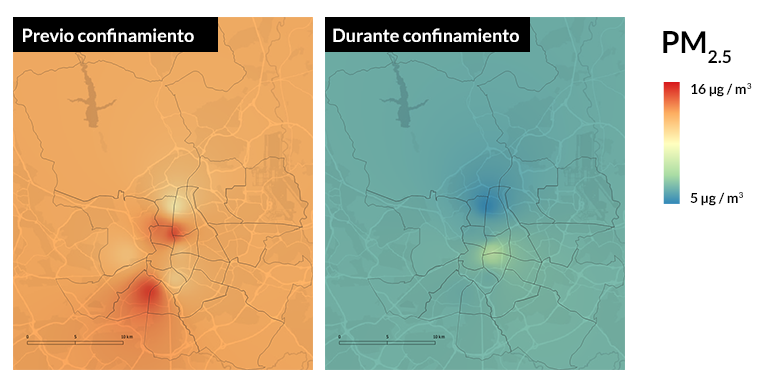
<style>
.page{position:relative;width:780px;height:380px;background:#ffffff}
.page>*{position:absolute;margin:0}
.t1{font:18px "Lato-Bold";color:#ffffff}
.t2{font:30px "Lato-Bold";color:#000000}
.t3{font:14px "Lato-Bold";color:#000000}
</style>
<div class="page">
<p class="t1" style="left:23px;top:28px;width:171px;height:14px">Previo confinamiento</p>
<p class="t1" style="left:333px;top:28px;width:186px;height:14px">Durante confinamiento</p>
<p class="t2" style="left:663px;top:31px;width:68px;height:33px">PM2.5</p>
<p class="t3" style="left:691px;top:83px;width:61px;height:14px">16 μg / m3</p>
<p class="t3" style="left:690px;top:192px;width:53px;height:14px">5 μg / m3</p>
</div>
